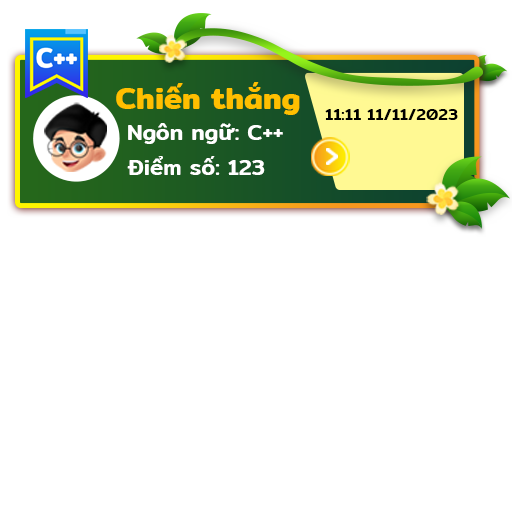
<style>
.page{position:relative;width:512px;height:512px;background:#ffffff}
.page>*{position:absolute;margin:0}
.t1{font:30.7px "Mitr-SemiBold";color:#ffbf00}
.t2{font:16.7px "Mitr-Medium";color:#000000}
.t3{font:22.3px "Mitr-Medium";color:#ffffff}
</style>
<div class="page">
<p class="t1" style="left:116px;top:82px;width:184px;height:33px">Chiến thắng</p>
<p class="t2" style="left:325px;top:109px;width:133px;height:11px">11:11 11/11/2023</p>
<p class="t3" style="left:128px;top:123px;width:155px;height:21px">Ngôn ngữ: C++</p>
<p class="t3" style="left:127px;top:156px;width:138px;height:19px">Điểm số: 123</p>
</div>
